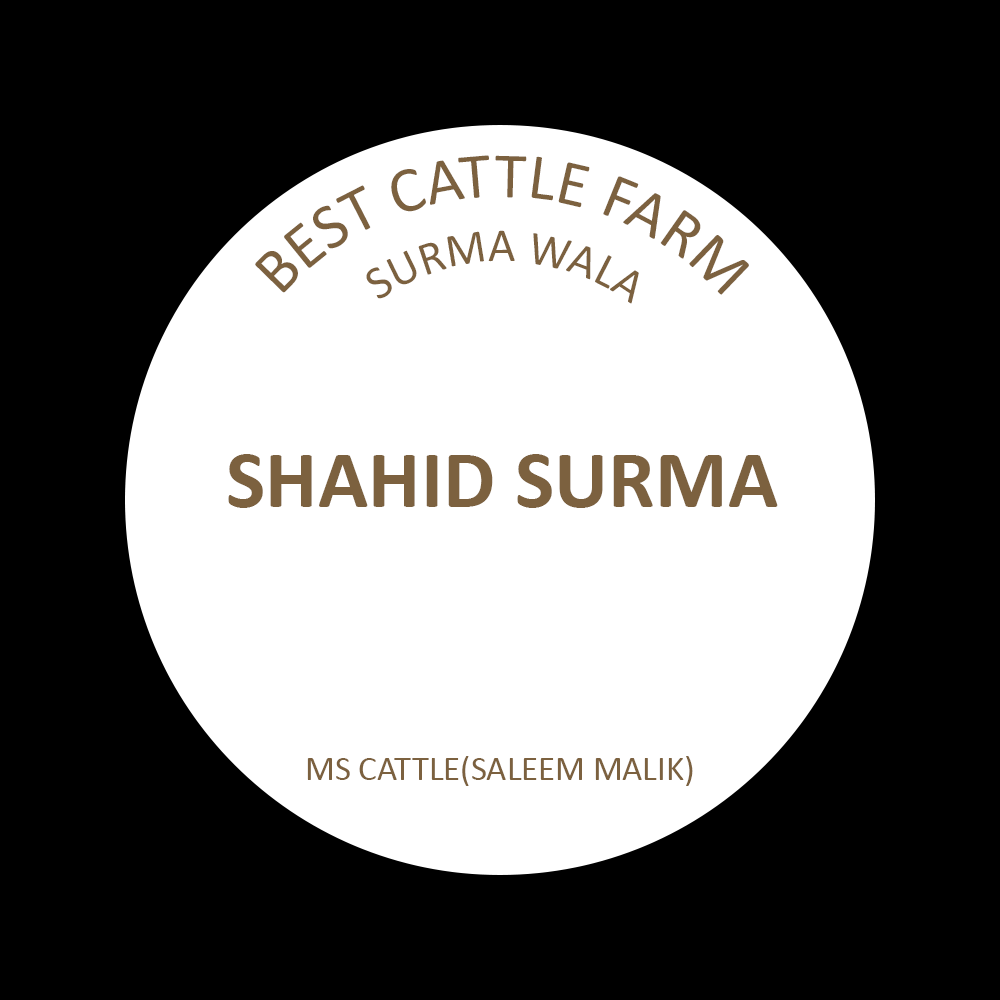
<style>
.page{position:relative;width:1000px;height:1000px;background:#000000}
.page>*{position:absolute;margin:0}
.t1{font:65.2px/11.9px "Calibri";color:#7c613f}
.t2{font:47.4px "Calibri";color:#7c613f}
.t3{font:83.3px "Calibri-Bold";color:#7c613f}
.t4{font:34.7px "Calibri";color:#7c613f}
</style>
<div class="page">
<p class="t1" style="left:255px;top:155px;width:494px;height:140px;rotate:-4deg">BEST CATTLE FARM<br>sas</p>
<p class="t2" style="left:366px;top:230px;width:273px;height:74px;rotate:4deg">SURMA WALA</p>
<p class="t3" style="left:228px;top:454px;width:550px;height:54px">SHAHID SURMA</p>
<p class="t4" style="left:307px;top:756px;width:386px;height:30px">MS CATTLE(SALEEM MALIK)</p>
</div>
